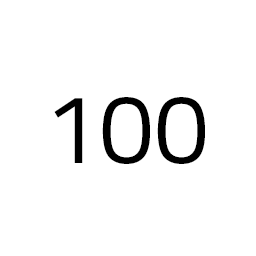
<style>
.page{position:relative;width:256px;height:256px;background:#ffffff}
.page>*{position:absolute;margin:0}
.t1{font:98.3px "TitilliumWeb-Regular";color:#000000}
</style>
<div class="page">
<p class="t1" style="left:54px;top:97px;width:151px;height:67px">100</p>
</div>
